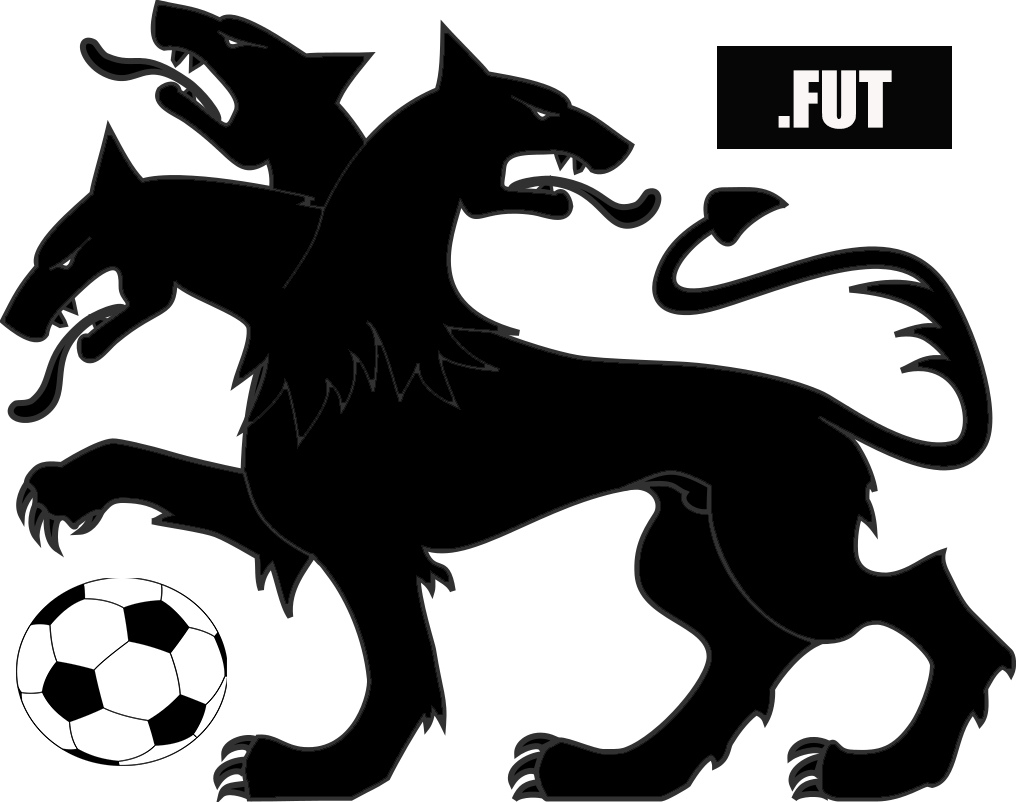
<style>
.page{position:relative;width:1016px;height:802px;background:#ffffff}
.page>*{position:absolute;margin:0}
.t1{font:72px "Impact";color:#faf6f6}
</style>
<div class="page">
<p class="t1" style="left:778px;top:70px;width:114px;height:59px">.FUT</p>
</div>
